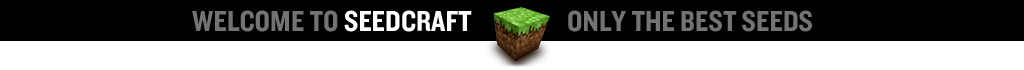
<style>
.page{position:relative;width:1024px;height:70px;background:#000000}
.page>*{position:absolute;margin:0}
.t1{font:30px "Knockout-HTF50-Welterweight";color:#737373}
.t2{font:30px "Knockout-HTF50-Welterweight";color:#ffffff}
</style>
<div class="page">
<p class="t1" style="left:192px;top:10px;width:280px;height:22px">WELCOME TO <span class="t2">SEEDCRAFT</span></p>
<p class="t1" style="left:568px;top:10px;width:244px;height:22px">ONLY THE BEST SEEDS</p>
</div>
